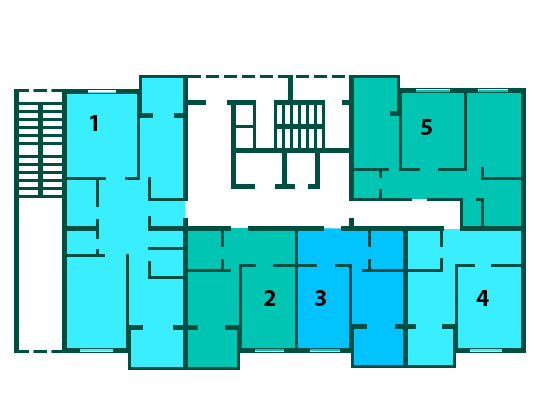
<style>
.page{position:relative;width:534px;height:413px;background:#ffffff}
.page>*{position:absolute;margin:0}
.t1{font:24px "MyriadPro-Bold";color:#000000;text-transform:uppercase}
</style>
<div class="page">
<p class="t1" style="left:90px;top:115px;width:7px;height:16px">1</p>
<p class="t1" style="left:421px;top:119px;width:11px;height:16px">5</p>
<p class="t1" style="left:264px;top:290px;width:12px;height:16px">2</p>
<p class="t1" style="left:315px;top:290px;width:11px;height:16px">3</p>
<p class="t1" style="left:476px;top:290px;width:13px;height:16px">4</p>
</div>
